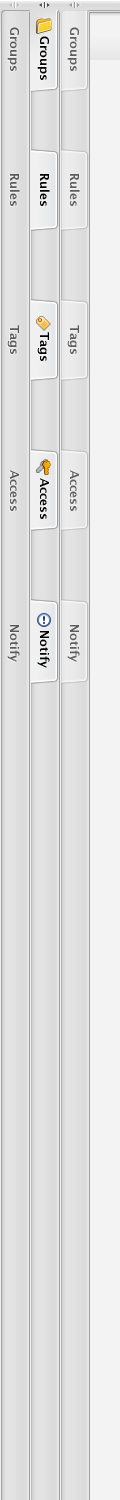
<style>
.page{position:relative;width:120px;height:1500px;background:#f3f3f3}
.page>*{position:absolute;margin:0}
.t1{font:12px "LucidaGrande-Bold";color:#5a5a5a}
.t2{font:12px "LucidaGrande-Bold";color:#5e5e5e}
.t3{font:12px "LucidaGrande-Bold";color:#000000}
</style>
<div class="page">
<p class="t1" style="left:7px;top:27px;width:12px;height:44px;rotate:90deg">Groups</p>
<p class="t2" style="left:67px;top:27px;width:12px;height:44px;rotate:90deg">Groups</p>
<p class="t3" style="left:37px;top:36px;width:12px;height:44px;rotate:90deg">Groups</p>
<p class="t1" style="left:10px;top:174px;width:10px;height:32px;rotate:90deg">Rules</p>
<p class="t3" style="left:40px;top:174px;width:10px;height:32px;rotate:90deg">Rules</p>
<p class="t2" style="left:70px;top:174px;width:10px;height:32px;rotate:90deg">Rules</p>
<p class="t1" style="left:7px;top:325px;width:12px;height:29px;rotate:90deg">Tags</p>
<p class="t2" style="left:67px;top:325px;width:12px;height:29px;rotate:90deg">Tags</p>
<p class="t3" style="left:37px;top:332px;width:12px;height:29px;rotate:90deg">Tags</p>
<p class="t1" style="left:10px;top:470px;width:9px;height:41px;rotate:90deg">Access</p>
<p class="t2" style="left:70px;top:470px;width:9px;height:41px;rotate:90deg">Access</p>
<p class="t3" style="left:40px;top:478px;width:9px;height:41px;rotate:90deg">Access</p>
<p class="t1" style="left:7px;top:625px;width:13px;height:37px;rotate:90deg">Notify</p>
<p class="t2" style="left:67px;top:625px;width:13px;height:37px;rotate:90deg">Notify</p>
<p class="t3" style="left:37px;top:631px;width:13px;height:37px;rotate:90deg">Notify</p>
</div>
